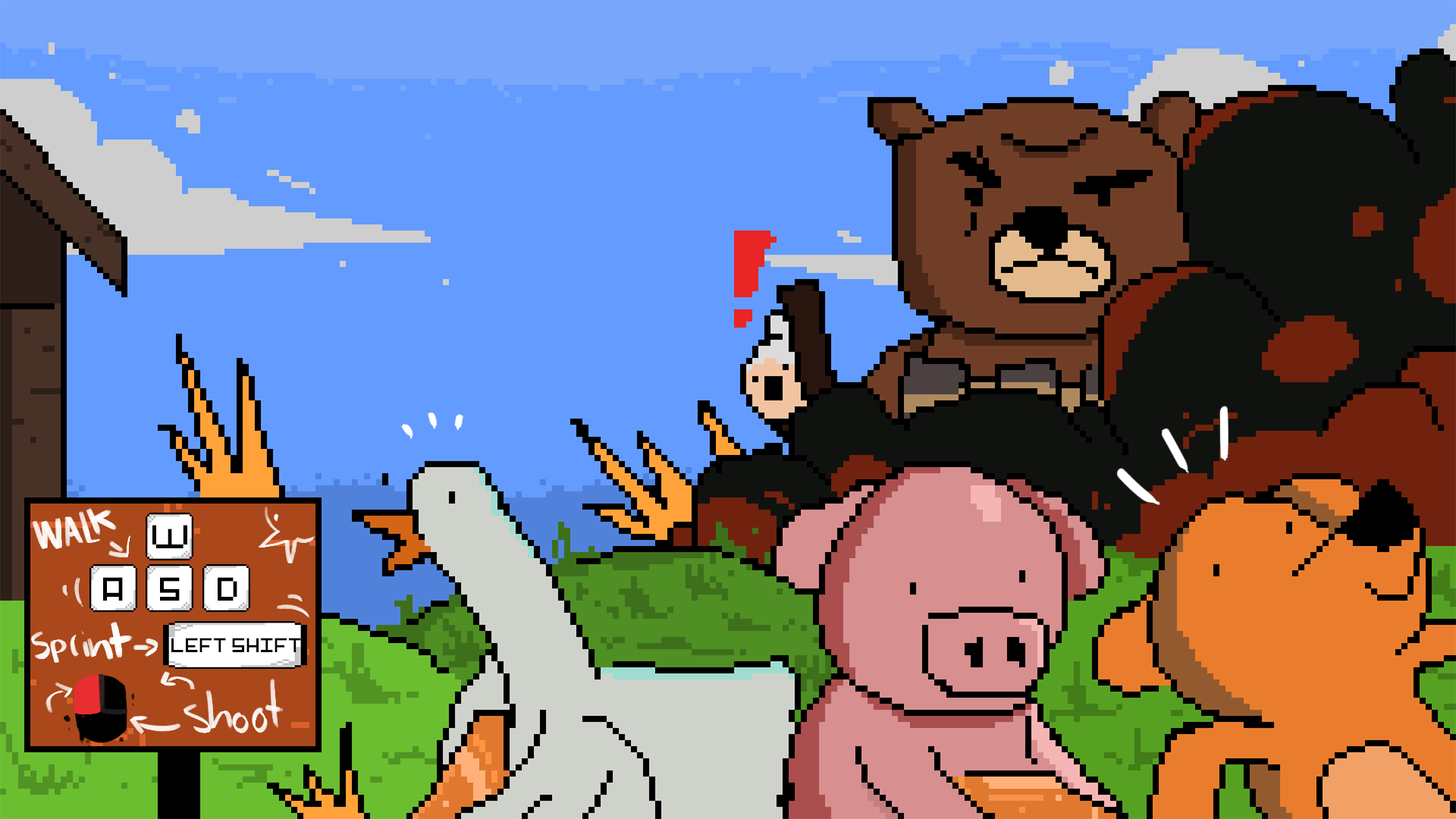
<style>
.page{position:relative;width:1456px;height:819px;background:#639bff}
.page>*{position:absolute;margin:0}
.t1{font:30.9px "Pixel-Art";color:#000000}
.t2{font:18.8px "Pixel-Art";color:#000000}
</style>
<div class="page">
<p class="t1" style="left:152px;top:525px;width:35px;height:23px">W</p>
<p class="t1" style="left:103px;top:577px;width:20px;height:24px">A</p>
<p class="t1" style="left:160px;top:577px;width:20px;height:24px">S</p>
<p class="t1" style="left:218px;top:577px;width:19px;height:24px">D</p>
<p class="t2" style="left:171px;top:638px;width:130px;height:14px">LEFT SHIFT</p>
</div>
